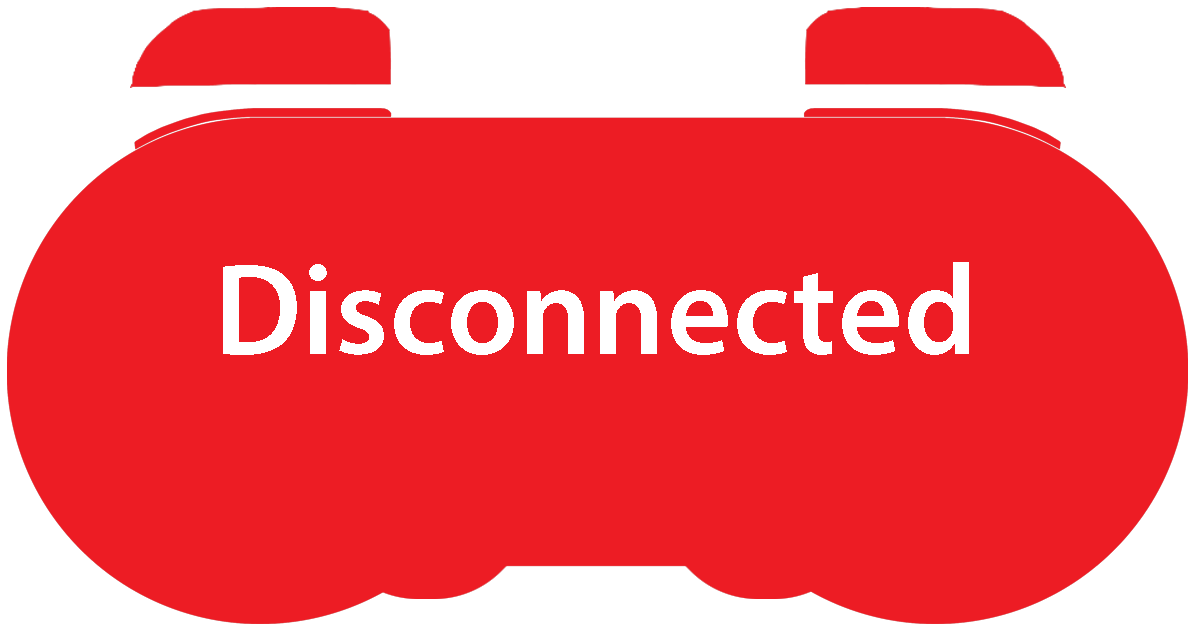
<style>
.page{position:relative;width:1192px;height:631px;background:#ed1c24}
.page>*{position:absolute;margin:0}
.t1{font:130.1px "MyriadPro-Semibold";color:#ffffff}
</style>
<div class="page">
<p class="t1" style="left:223px;top:262px;width:746px;height:93px">Disconnected</p>
</div>
